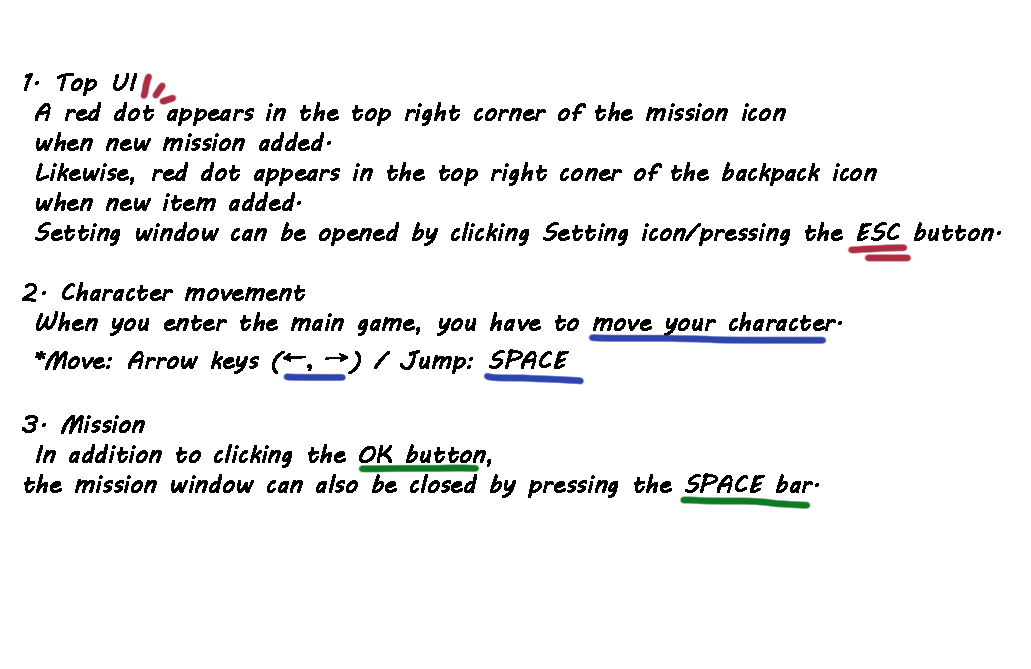
<style>
.page{position:relative;width:1031px;height:669px;background:#ffffff}
.page>*{position:absolute;margin:0}
.t1{font:24px/30px "MVBoli";color:#000000;font-weight:bold}
.t2{font:36px/42px "NanumAmSeuTeReuDam";color:#000000;font-weight:bold}
</style>
<div class="page">
<p class="t1" style="left:22px;top:73px;width:979px;height:425px">1. Top UI<br> A red dot appears in the top right corner of the mission icon <br> when new mission added.<br> Likewise, red dot appears in the top right coner of the backpack icon<br> when new item added.<br> Setting window can be opened by clicking Setting icon/pressing the ESC button.<br><br>2. Character movement<br> When you enter the main game, you have to move your character.<br> *Move: Arrow keys (<span class="t2">←, →</span>) / Jump: SPACE<br><br>3. Mission<br> In addition to clicking the OK button, <br>the mission window can also be closed by pressing the SPACE bar.</p>
</div>
